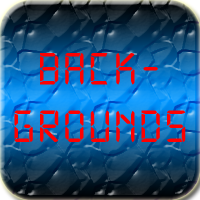
<style>
.page{position:relative;width:200px;height:200px}
.page>*{position:absolute;margin:0}
.t1{font:48px "Digital-7Mono";letter-spacing:0.075em;color:#ff0000}
</style>
<div class="page">
<p class="t1" style="left:14px;top:53px;width:172px;height:89px;text-align:center">BAck-<br>grounds</p>
</div>
